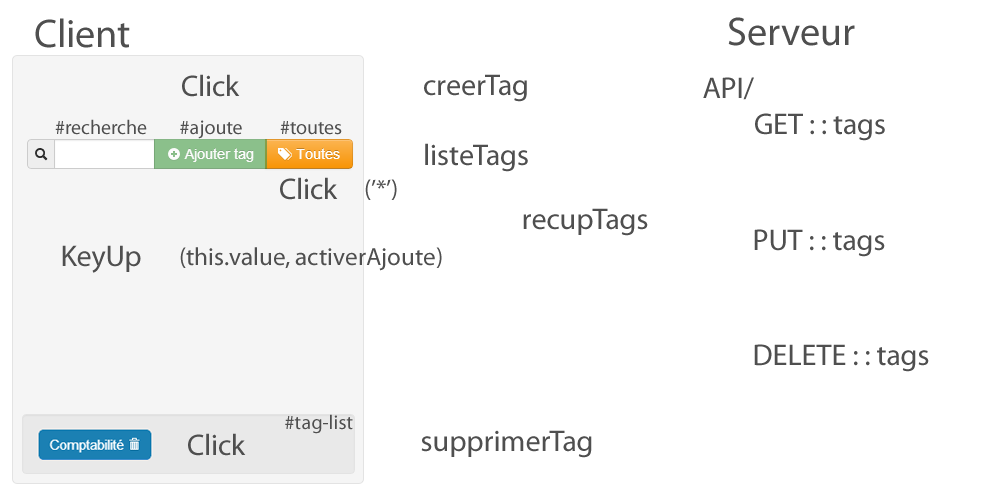
<style>
.page{position:relative;width:1000px;height:500px;background:#ffffff}
.page>*{position:absolute;margin:0}
.t1{font:40px "MyriadPro-Regular";color:#4f4f4f}
.t2{font:30px "MyriadPro-Regular";color:#4f4f4f}
.t3{font:20px "MyriadPro-Regular";color:#4f4f4f}
.t4{font:25px "MyriadPro-Regular";color:#4f4f4f}
</style>
<div class="page">
<p class="t1" style="left:728px;top:17px;width:127px;height:29px">Serveur</p>
<p class="t1" style="left:35px;top:18px;width:95px;height:30px">Client</p>
<p class="t2" style="left:182px;top:74px;width:58px;height:23px">Click</p>
<p class="t2" style="left:424px;top:74px;width:103px;height:28px">creerTag</p>
<p class="t2" style="left:703px;top:77px;width:51px;height:23px">API/</p>
<p class="t2" style="left:755px;top:113px;width:130px;height:28px">GET : : tags</p>
<p class="t3" style="left:55px;top:119px;width:92px;height:16px">#recherche</p>
<p class="t3" style="left:180px;top:120px;width:62px;height:19px">#ajoute</p>
<p class="t3" style="left:280px;top:121px;width:62px;height:14px">#toutes</p>
<p class="t2" style="left:425px;top:143px;width:103px;height:29px">listeTags</p>
<p class="t2" style="left:280px;top:177px;width:58px;height:23px">Click</p>
<p class="t4" style="left:365px;top:179px;width:32px;height:21px">(’*’)</p>
<p class="t2" style="left:523px;top:208px;width:125px;height:28px">recupTags</p>
<p class="t2" style="left:754px;top:229px;width:131px;height:28px">PUT : : tags</p>
<p class="t2" style="left:62px;top:245px;width:79px;height:28px">KeyUp</p>
<p class="t4" style="left:180px;top:247px;width:262px;height:24px">(this.value, activerAjoute)</p>
<p class="t2" style="left:754px;top:344px;width:175px;height:28px">DELETE : : tags</p>
<p class="t3" style="left:285px;top:414px;width:68px;height:20px">#tag-list</p>
<p class="t2" style="left:188px;top:433px;width:58px;height:23px">Click</p>
<p class="t2" style="left:421px;top:430px;width:171px;height:28px">supprimerTag</p>
</div>
